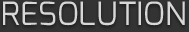
<style>
.page{position:relative;width:189px;height:32px;background:#333333}
.page>*{position:absolute;margin:0}
.t1{font:32px "Exo-Regular";color:#d7d7d7;text-transform:uppercase}
</style>
<div class="page">
<p class="t1" style="left:3px;top:1px;width:182px;height:25px">Resolution</p>
</div>
